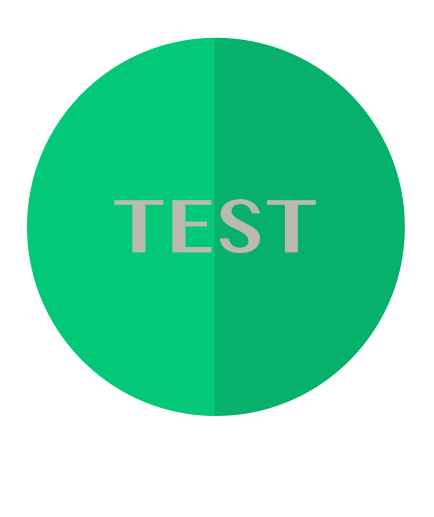
<style>
.page{position:relative;width:434px;height:517px;background:#ffffff}
.page>*{position:absolute;margin:0}
.t1{font:74.8px "MalayalamMN-Bold";color:#bbbab0;text-transform:uppercase}
</style>
<div class="page">
<p class="t1" style="left:114px;top:199px;width:202px;height:54px">TESt</p>
</div>
